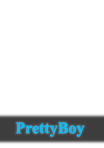
<style>
.page{position:relative;width:104px;height:148px;background:#ffffff}
.page>*{position:absolute;margin:0}
.t1{font:16px "TimesNewRomanPS-BoldMT";color:#00c0ff}
</style>
<div class="page">
<p class="t1" style="left:15px;top:122px;width:70px;height:15px">PrettyBoy</p>
</div>
